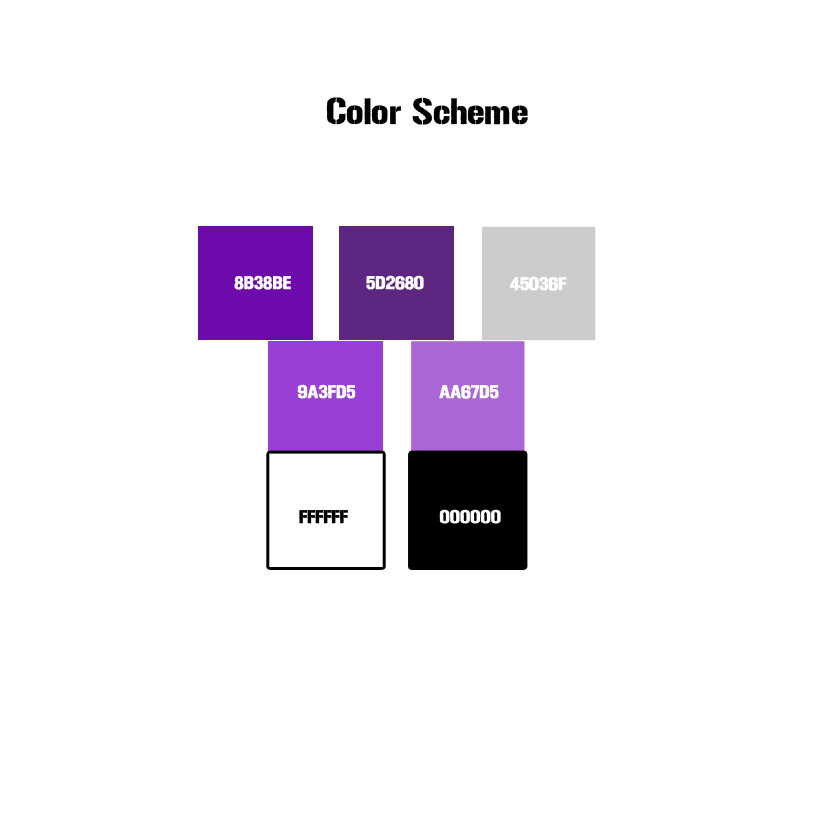
<style>
.page{position:relative;width:822px;height:822px;background:#ffffff}
.page>*{position:absolute;margin:0}
.t1{font:36px "UrbanSketch";color:#000000}
.t2{font:18px "UrbanSketch";color:#ffffff}
.t3{font:24px "UrbanSketch";color:#000000}
.t4{font:18px "UrbanSketch";color:#000000}
</style>
<div class="page">
<p class="t1" style="left:326px;top:97px;width:202px;height:28px">Color Scheme</p>
<p class="t2" style="left:234px;top:275px;width:57px;height:15px">8B38BE</p>
<p class="t2" style="left:366px;top:275px;width:58px;height:15px">5D2680 <span class="t3"> 5D2680</span></p>
<p class="t2" style="left:510px;top:276px;width:57px;height:15px">45036F</p>
<p class="t2" style="left:297px;top:384px;width:59px;height:15px">9A3FD5</p>
<p class="t2" style="left:439px;top:385px;width:60px;height:14px">AA67D5</p>
<p class="t4" style="left:299px;top:510px;width:49px;height:14px">FFFFFF</p>
<p class="t2" style="left:439px;top:509px;width:62px;height:15px">000000</p>
</div>
